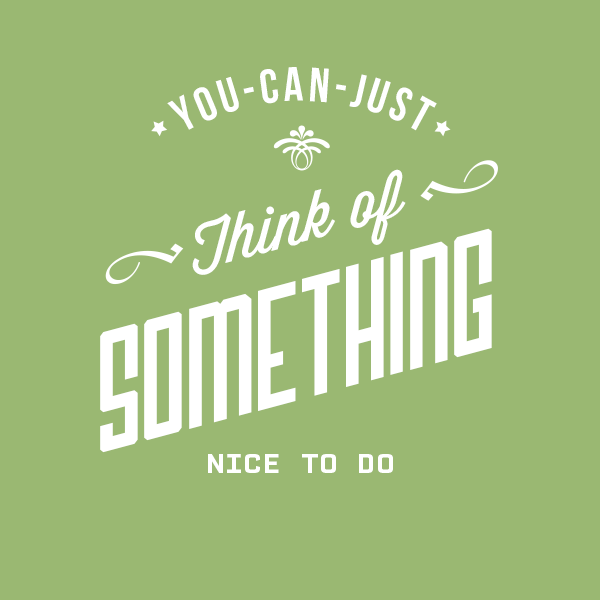
<style>
.page{position:relative;width:600px;height:600px;background:#9ab872}
.page>*{position:absolute;margin:0}
.t1{font:48px "BebasNeue";letter-spacing:0.08em;color:#ffffff}
.t2{font:64px "WisdomScriptAI";color:#ffffff}
.t3{font:120px "Airship27";letter-spacing:-0.05em;color:#ffffff;scale:0.97 1}
.t4{font:28px "CPMono_v07Bold";letter-spacing:0.025em;color:#ffffff}
</style>
<div class="page">
<p class="t1" style="left:167px;top:67px;width:270px;height:64px">YOU-can-just</p>
<p class="t2" style="left:192px;top:169px;width:214px;height:106px;rotate:-15deg">Think of</p>
<p class="t3" style="left:100px;top:228px;width:392px;height:225px;rotate:-15deg">SOMETHING</p>
<p class="t4" style="left:208px;top:454px;width:185px;height:19px">NICE TO DO</p>
</div>
